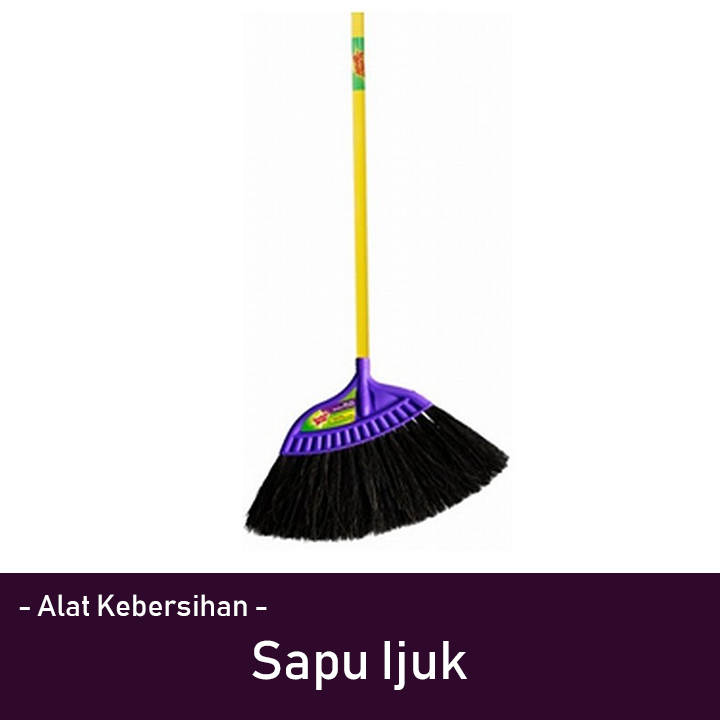
<style>
.page{position:relative;width:720px;height:720px;background:#ffffff}
.page>*{position:absolute;margin:0}
.t1{font:30px "Bahnschrift";color:#ffffff}
.t2{font:53.6px "Bahnschrift";color:#ffffff}
</style>
<div class="page">
<p class="t1" style="left:19px;top:594px;width:248px;height:23px">- Alat Kebersihan -</p>
<p class="t2" style="left:252px;top:640px;width:215px;height:50px">Sapu Ijuk</p>
</div>
